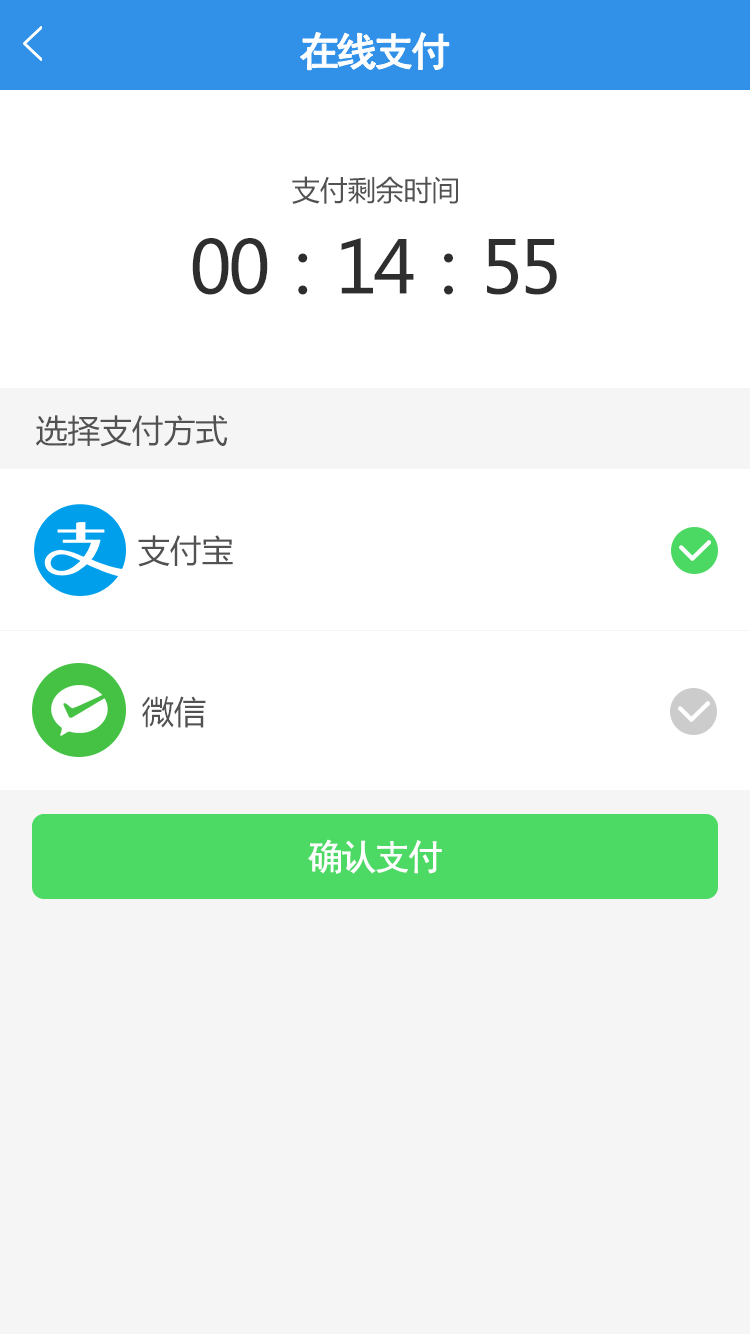
<style>
.page{position:relative;width:750px;height:1334px;background:#ffffff}
.page>*{position:absolute;margin:0}
.t1{font:40px "SimHei";letter-spacing:-0.1em;color:#ffffff;font-weight:bold}
.t2{font:28px "MicrosoftYaHei";color:#525252}
.t3{font:72px "MicrosoftYaHei";letter-spacing:-0.05em;color:#2e2e2e}
.t4{font:32px "MicrosoftYaHei";color:#525252}
.t5{font:36px "SimHei";letter-spacing:-0.1em;color:#ffffff;font-weight:bold}
</style>
<div class="page">
<p class="t1" style="left:300px;top:32px;width:149px;height:38px">在线支付</p>
<p class="t2" style="left:292px;top:176px;width:166px;height:28px">支付剩余时间</p>
<p class="t3" style="left:192px;top:238px;width:365px;height:57px">00：14：55</p>
<p class="t4" style="left:36px;top:415px;width:192px;height:32px">选择支付方式</p>
<p class="t4" style="left:138px;top:535px;width:95px;height:32px">支付宝</p>
<p class="t4" style="left:142px;top:696px;width:64px;height:32px">微信</p>
<p class="t5" style="left:308px;top:839px;width:134px;height:35px">确认支付</p>
</div>
